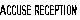
<style>
.page{position:relative;width:80px;height:20px;background:#ffffff}
.page>*{position:absolute;margin:0}
.t1{font:10.2px "TopSecretRegularSWFTE";color:#000000}
</style>
<div class="page">
<p class="t1" style="left:0px;top:5px;width:77px;height:10px">ACCUSE RECEPTION</p>
</div>
